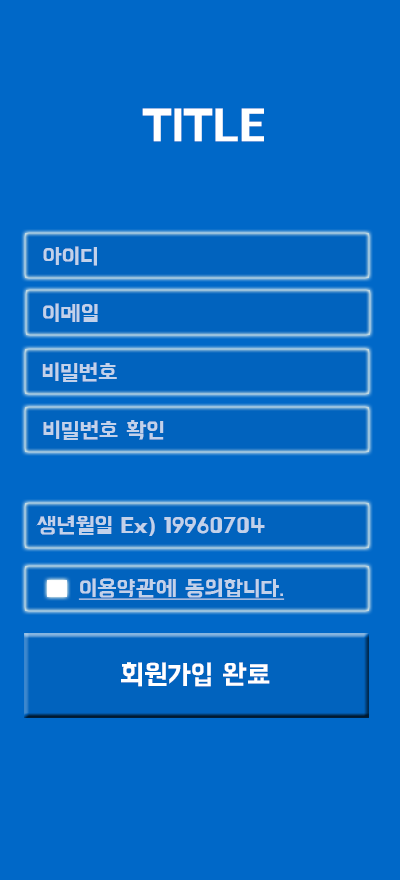
<style>
.page{position:relative;width:400px;height:880px;background:#0068c8}
.page>*{position:absolute;margin:0}
.t1{font:45px "BMHANNAPro";color:#ffffff}
.t2{font:22.1px "BMHANNA11yrsold";color:#c2d1ea;scale:1.04 1}
.t3{font:22.1px "BMHANNA11yrsold";color:#c2d1ea;text-decoration:underline;scale:1.04 1}
.t4{font:27.9px "BMHANNAPro";color:#ffffff}
</style>
<div class="page">
<p class="t1" style="left:142px;top:108px;width:122px;height:34px">TITLE</p>
<p class="t2" style="left:43px;top:246px;width:54px;height:20px">아이디</p>
<p class="t2" style="left:43px;top:303px;width:55px;height:19px">이메일</p>
<p class="t2" style="left:42px;top:362px;width:75px;height:20px">비밀번호</p>
<p class="t2" style="left:43px;top:420px;width:121px;height:20px">비밀번호 확인</p>
<p class="t2" style="left:36px;top:515px;width:229px;height:21px">생년월일 Ex) 19960704</p>
<p class="t3" style="left:78px;top:578px;width:207px;height:22px">이용약관에 동의합니다.</p>
<p class="t4" style="left:121px;top:662px;width:149px;height:25px">회원가입 완료</p>
</div>
